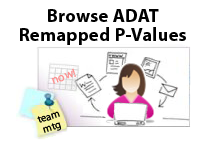
<style>
.page{position:relative;width:200px;height:150px;background:#ffffff}
.page>*{position:absolute;margin:0}
.t1{font:18.7px/18.7px "MyriadPro-Bold";letter-spacing:0.01em;color:#000000}
.t2{font:12px "MyriadPro-Regular";letter-spacing:0.01em;color:#fe9292}
.t3{font:10.7px/10.7px "MyriadPro-Regular";letter-spacing:0.01em;color:#030303}
</style>
<div class="page">
<p class="t1" style="left:20px;top:9px;width:166px;height:36px;text-align:center">Browse ADAT<br>Remapped P-Values</p>
<p class="t2" style="left:51px;top:68px;width:25px;height:16px;rotate:-19deg">now!</p>
<p class="t3" style="left:37px;top:111px;width:25px;height:22px;text-align:center;rotate:-19deg">team<br>mtg</p>
</div>
